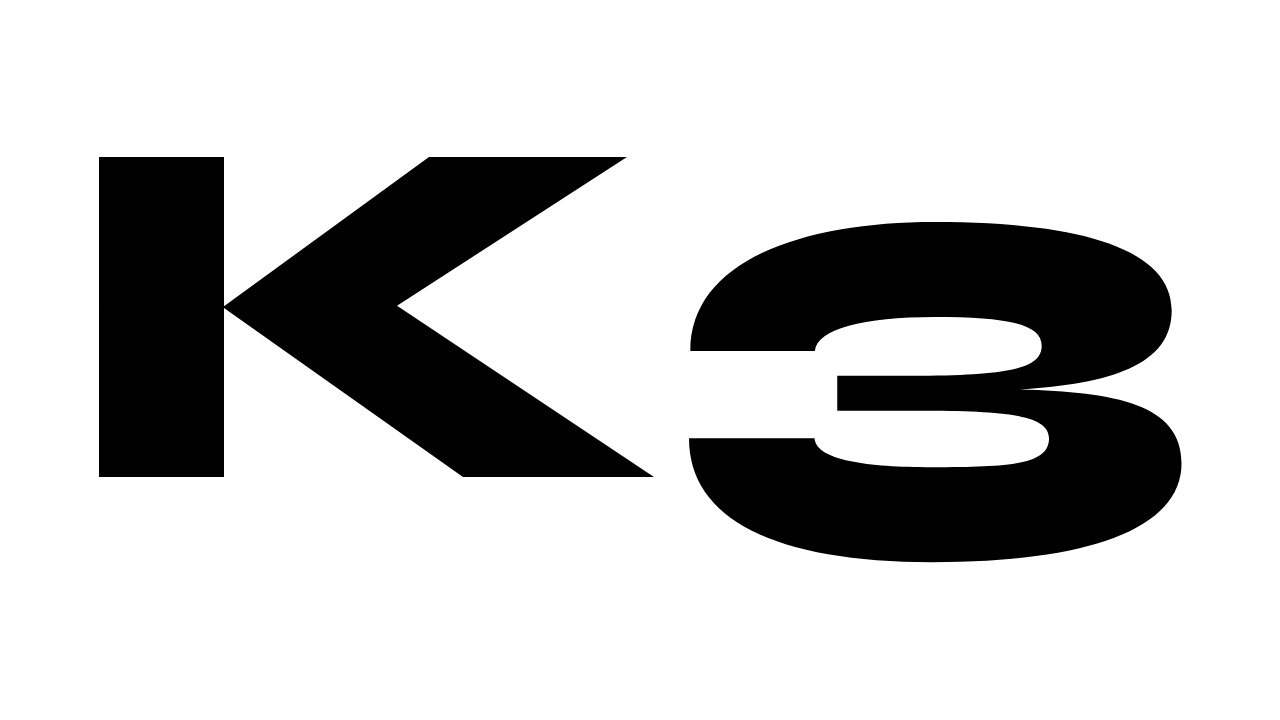
<style>
.page{position:relative;width:1280px;height:720px;background:#ffffff}
.page>*{position:absolute;margin:0}
.t1{font:500px "Syne-Extra";color:#000000}
</style>
<div class="page">
<p class="t1" style="left:98px;top:156px;width:1084px;height:407px">K3</p>
</div>
